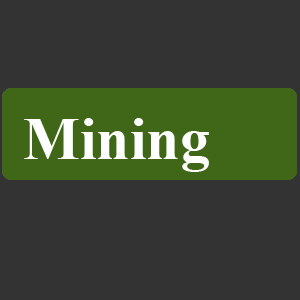
<style>
.page{position:relative;width:300px;height:300px;background:#333333}
.page>*{position:absolute;margin:0}
.t1{font:60px "TimesNewRomanPS-BoldMT";color:#fefefe}
</style>
<div class="page">
<p class="t1" style="left:24px;top:118px;width:185px;height:54px">Mining</p>
</div>
